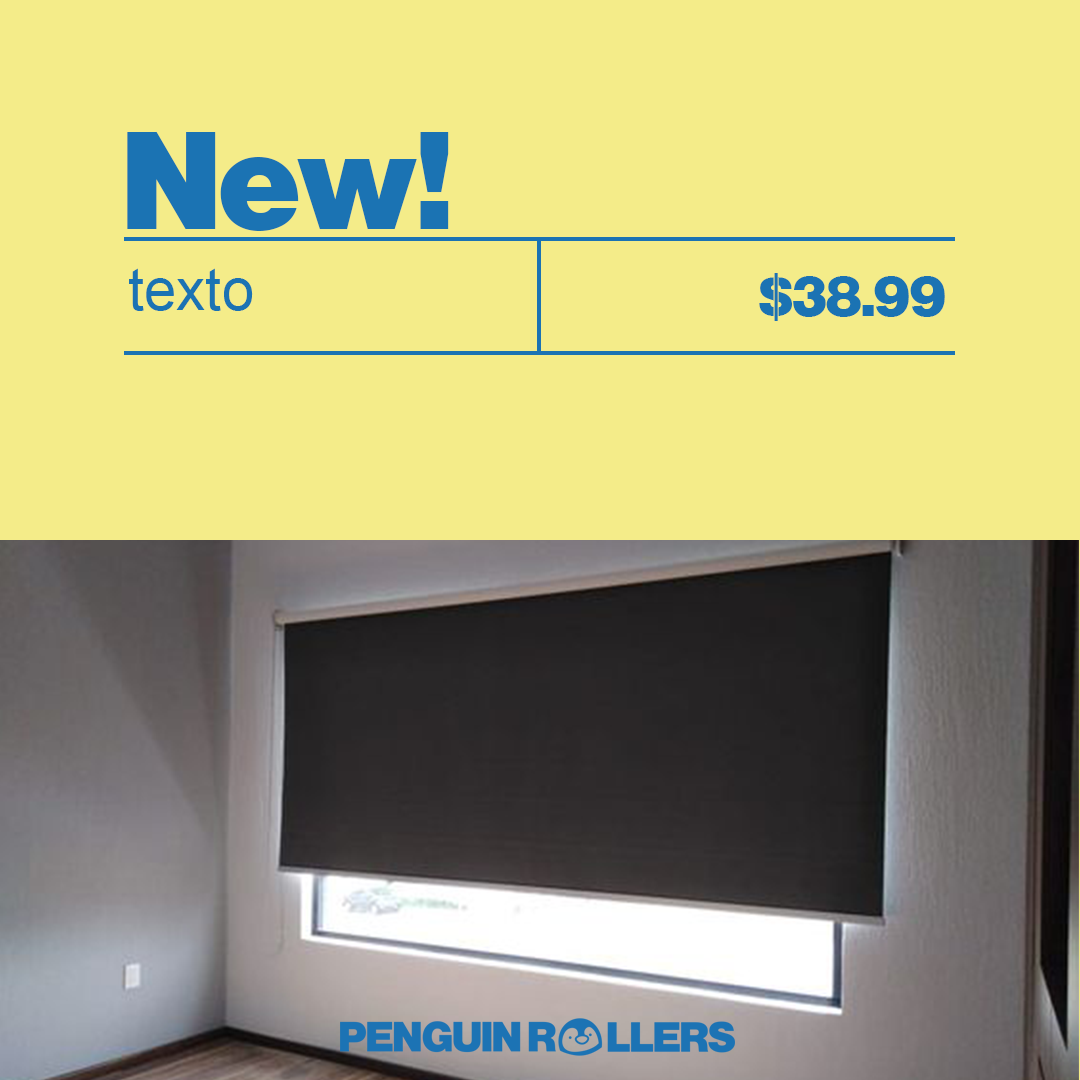
<style>
.page{position:relative;width:1080px;height:1080px;background:#f4ec89}
.page>*{position:absolute;margin:0}
.t1{font:144.9px "NimbusSansBeckerPBla";color:#1b73b3}
.t2{font:58.3px "ArialMT";color:#1b73b3}
.t3{font:58.3px "NimbusSansBeckerPBla";color:#1b73b3}
</style>
<div class="page">
<p class="t1" style="left:127px;top:132px;width:322px;height:99px">New!</p>
<p class="t2" style="left:129px;top:268px;width:124px;height:43px">texto</p>
<p class="t3" style="left:759px;top:273px;width:186px;height:48px">$38.99</p>
</div>
